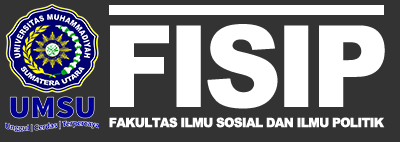
<style>
.page{position:relative;width:400px;height:142px;background:#333333}
.page>*{position:absolute;margin:0}
.t1{font:113.8px "Arial-Black";letter-spacing:-0.055em;color:#ffffff;text-transform:uppercase;scale:0.94 1}
.t2{font:13px "Arial-Black";letter-spacing:-0.055em;color:#ffffff;text-transform:uppercase;scale:0.94 1}
</style>
<div class="page">
<p class="t1" style="left:110px;top:24px;width:275px;height:85px">FISIP</p>
<p class="t2" style="left:109px;top:117px;width:276px;height:11px">FAKULTAS ILMU SOSIAL DAN ILMU POLITIK</p>
</div>
